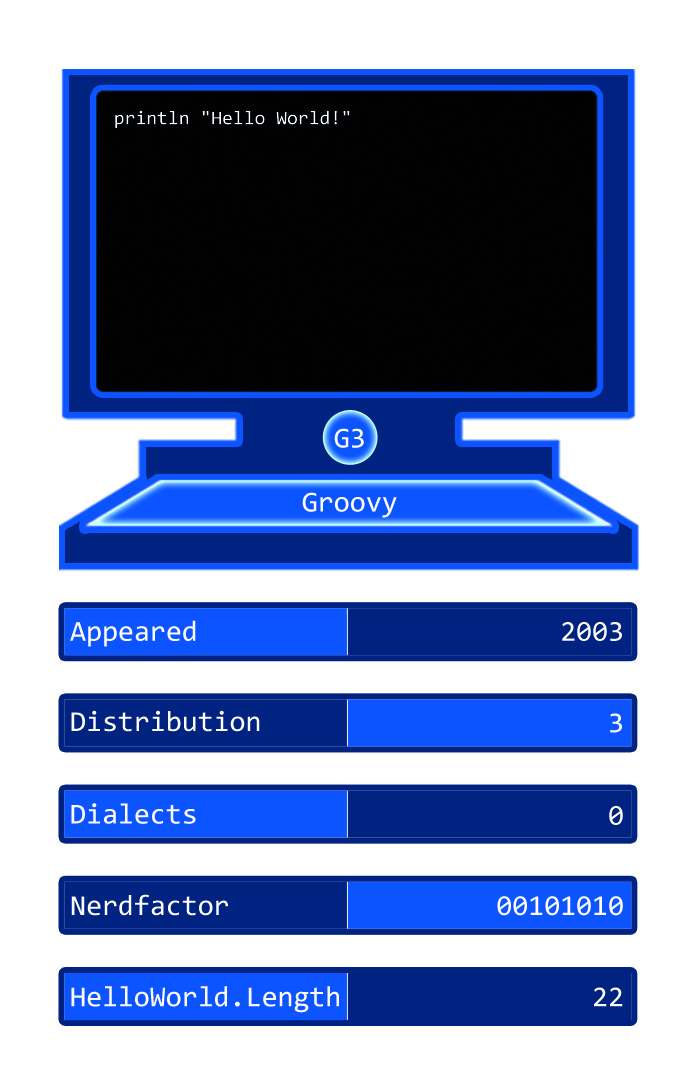
<style>
.page{position:relative;width:697px;height:1087px;background:#ffffff}
.page>*{position:absolute;margin:0}
.t1{font:19.3px "Consolas";color:#ffffff}
.t2{font:29px "Consolas";color:#ffffff}
</style>
<div class="page">
<p class="t1" style="left:115px;top:110px;width:235px;height:18px">println "Hello World!"</p>
<p class="t2" style="left:334px;top:428px;width:30px;height:20px">G3</p>
<p class="t2" style="left:302px;top:492px;width:95px;height:26px">Groovy</p>
<p class="t2" style="left:70px;top:620px;width:126px;height:27px">Appeared</p>
<p class="t2" style="left:562px;top:622px;width:60px;height:19px">2003</p>
<p class="t2" style="left:71px;top:710px;width:189px;height:22px">Distribution</p>
<p class="t2" style="left:610px;top:713px;width:12px;height:20px">3</p>
<p class="t2" style="left:71px;top:803px;width:125px;height:21px">Dialects</p>
<p class="t2" style="left:609px;top:806px;width:14px;height:19px">0</p>
<p class="t2" style="left:71px;top:894px;width:157px;height:22px">Nerdfactor</p>
<p class="t2" style="left:497px;top:896px;width:126px;height:20px">00101010</p>
<p class="t2" style="left:71px;top:986px;width:268px;height:27px">HelloWorld.Length</p>
<p class="t2" style="left:594px;top:987px;width:29px;height:20px">22</p>
</div>
